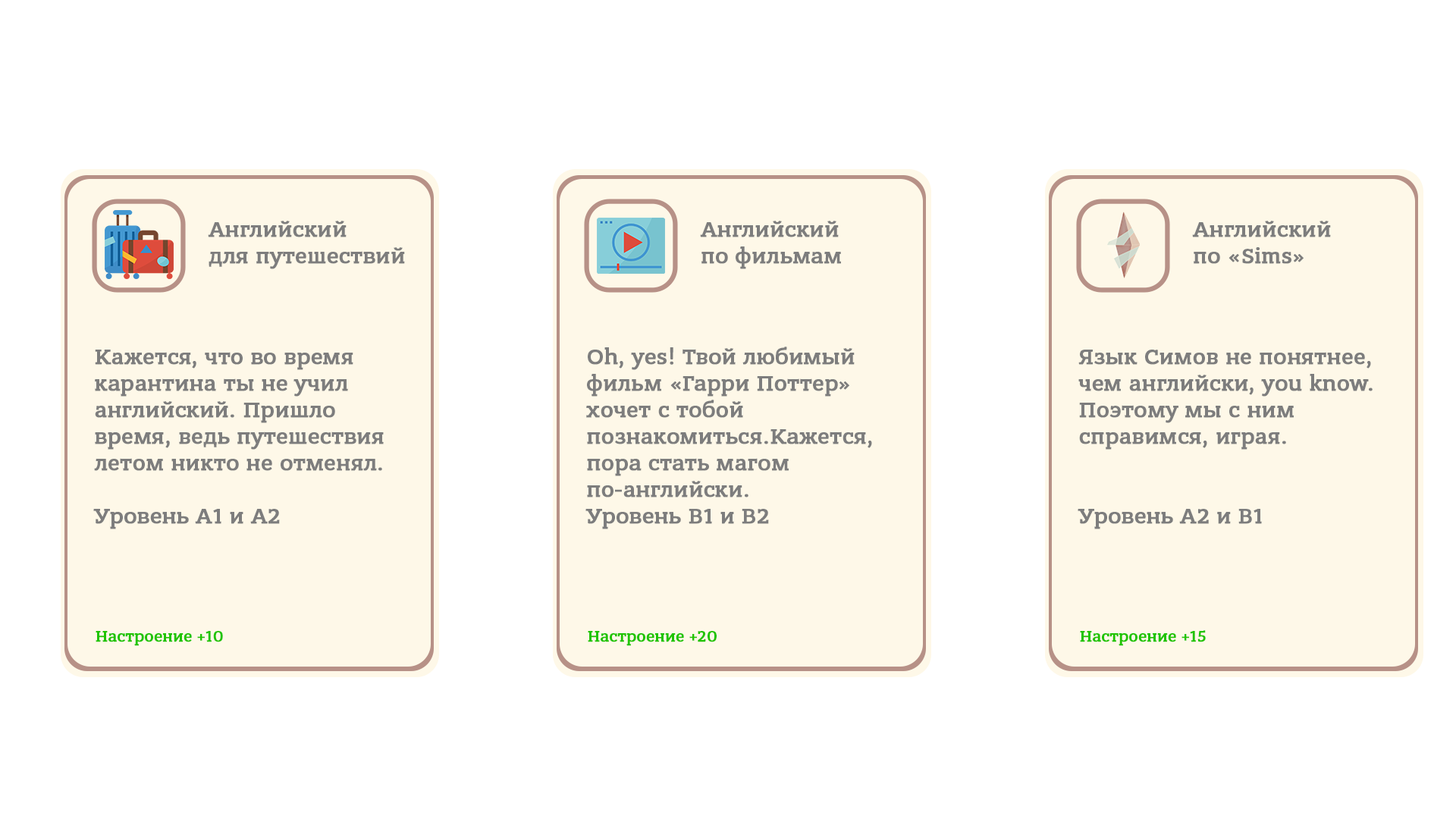
<style>
.page{position:relative;width:1456px;height:819px;background:#ffffff}
.page>*{position:absolute;margin:0}
.t1{font:22.1px "BanderaProMedium";color:#7d7d7d;font-weight:bold}
.t2{font:15.8px "BanderaProMedium";color:#20c400;font-weight:bold}
</style>
<div class="page">
<p class="t1" style="left:208px;top:221px;width:197px;height:48px">Английский <br>для путешествий</p>
<p class="t1" style="left:700px;top:221px;width:141px;height:48px">Английский <br>по фильмам</p>
<p class="t1" style="left:1192px;top:221px;width:139px;height:43px">Английский <br>по «Sims»</p>
<p class="t1" style="left:93px;top:350px;width:291px;height:179px">Кажется, что во время карантина ты не учил английский. Пришло время, ведь путешествия летом никто не отменял.<br><br>Уровень А1 и А2</p>
<p class="t1" style="left:585px;top:347px;width:287px;height:182px">Oh, yes! Твой любимый фильм «Гарри Поттер» хочет с тобой познакомиться.Кажется, пора стать магом по-английски.<br>Уровень В1 и В2</p>
<p class="t1" style="left:1078px;top:350px;width:295px;height:179px">Язык Симов не понятнее, чем английски, you know.<br>Поэтому мы с ним справимся, играя.<br><br><br>Уровень А2 и В1</p>
<p class="t2" style="left:96px;top:631px;width:127px;height:15px">Настроение +10</p>
<p class="t2" style="left:588px;top:631px;width:129px;height:15px">Настроение +20</p>
<p class="t2" style="left:1080px;top:630px;width:126px;height:16px">Настроение +15</p>
</div>
